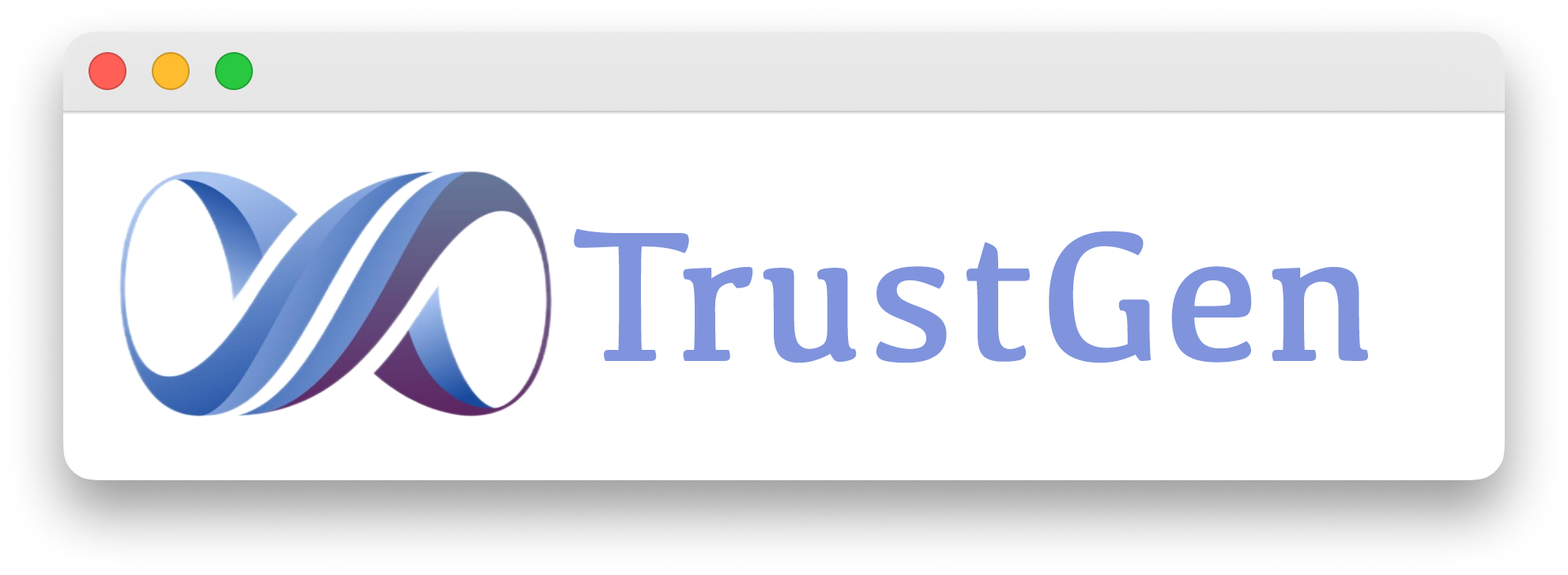
<style>
.page{position:relative;width:1568px;height:575px;background:#ffffff}
.page>*{position:absolute;margin:0}
.t1{font:189.7px "Kefa-Regular";color:#8094dd;font-weight:bold}
</style>
<div class="page">
<p class="t1" style="left:574px;top:228px;width:794px;height:136px">TrustGen</p>
</div>
